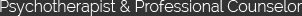
<style>
.page{position:relative;width:302px;height:16px;background:#333333}
.page>*{position:absolute;margin:0}
.t1{font:16px "Raleway-Light";color:#ffffff}
</style>
<div class="page">
<p class="t1" style="left:0px;top:0px;width:302px;height:16px">Psychotherapist &amp; Professional Counselor</p>
</div>
